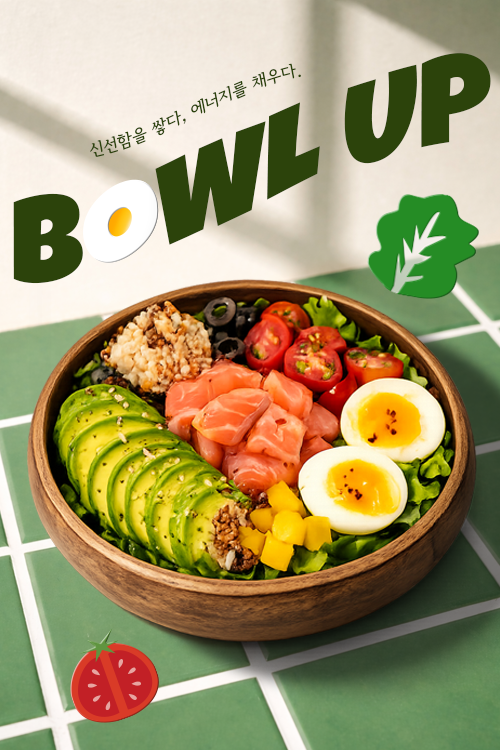
<style>
.page{position:relative;width:500px;height:750px}
.page>*{position:absolute;margin:0}
.t1{font:121px/68.7px "LuckiestGuy-Regular";color:#2c430b}
.t2{font:17px "SeoulHangangB";color:#2c430b}
</style>
<div class="page">
<p class="t1" style="left:13px;top:53px;width:478px;height:231px">B    WL UP</p>
<p class="t2" style="left:90px;top:63px;width:211px;height:94px;rotate:-11deg">신선함을 쌓다, 에너지를 채우다.</p>
</div>
